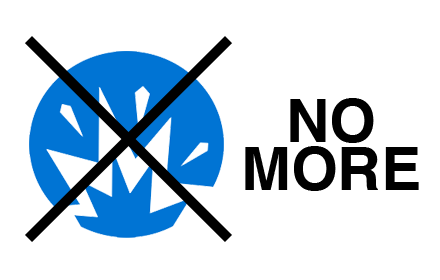
<style>
.page{position:relative;width:440px;height:280px;background:#ffffff}
.page>*{position:absolute;margin:0}
.t1{font:60px/48px "Helvetica-Bold";color:#000000}
</style>
<div class="page">
<p class="t1" style="left:245px;top:98px;width:174px;height:93px;text-align:center">NO<br>MORE</p>
</div>
